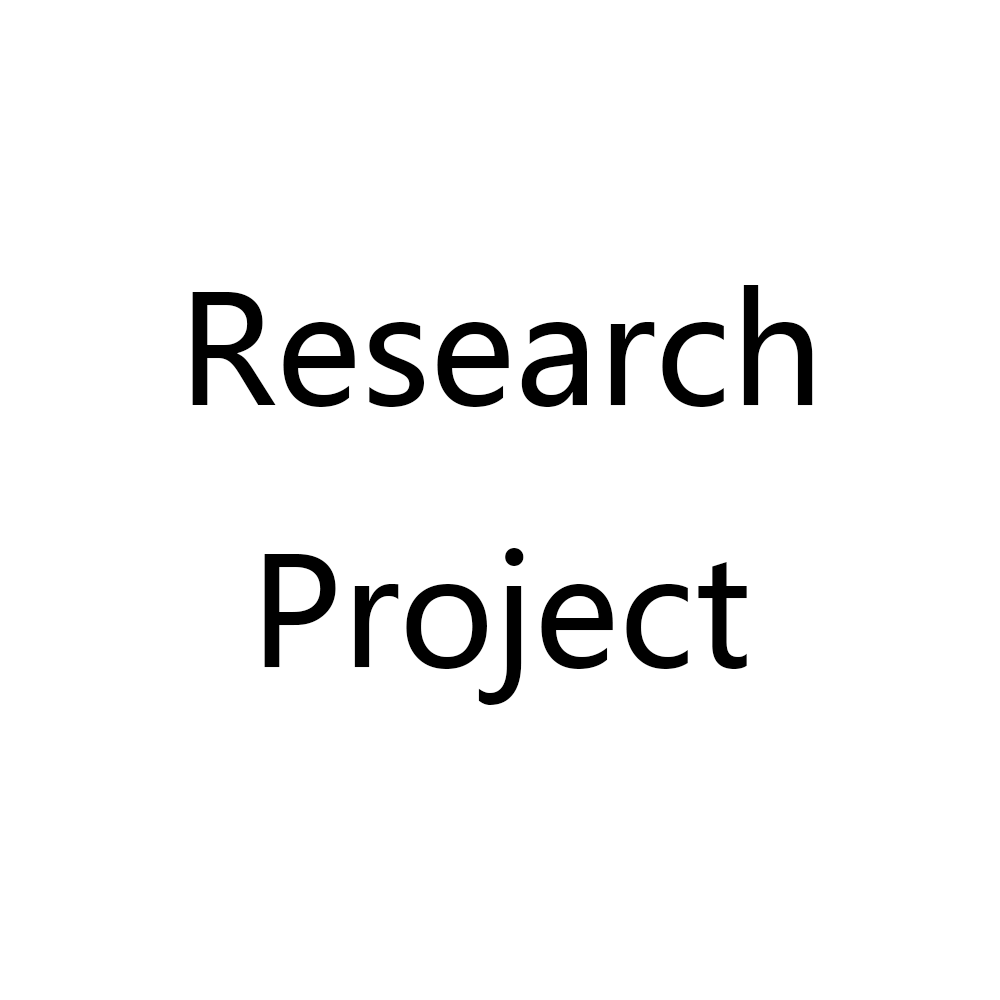
<style>
.page{position:relative;width:1000px;height:1000px;background:#ffffff}
.page>*{position:absolute;margin:0}
.t1{font:150px "MicrosoftYaHei";color:#000000}
</style>
<div class="page">
<p class="t1" style="left:192px;top:285px;width:621px;height:420px;text-align:center">Research Project</p>
</div>
